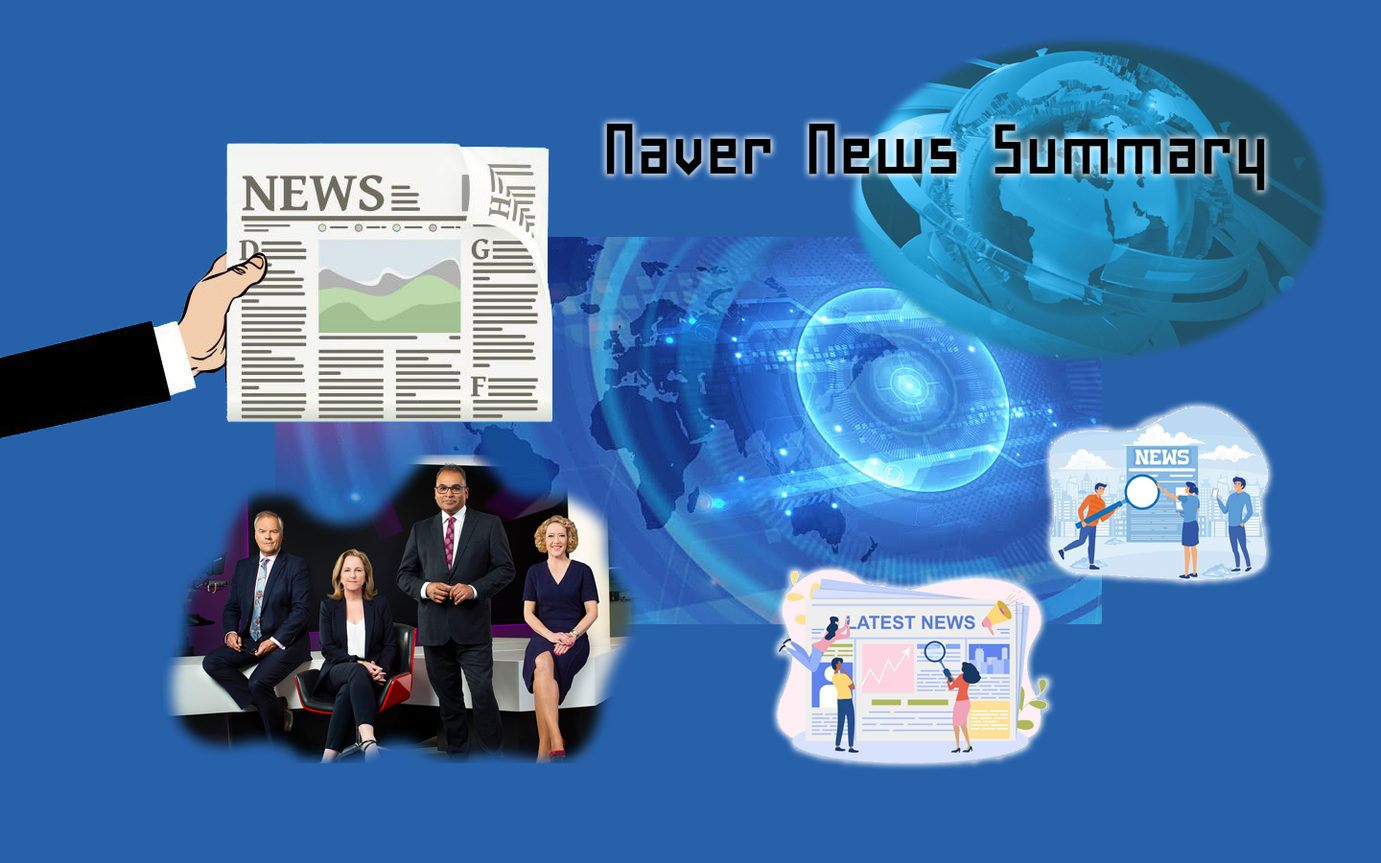
<style>
.page{position:relative;width:1381px;height:863px;background:#2761aa}
.page>*{position:absolute;margin:0}
.t1{font:89.3px "H2sa1M";color:#000000}
</style>
<div class="page">
<p class="t1" style="left:606px;top:124px;width:659px;height:67px">Naver News Summary</p>
</div>
